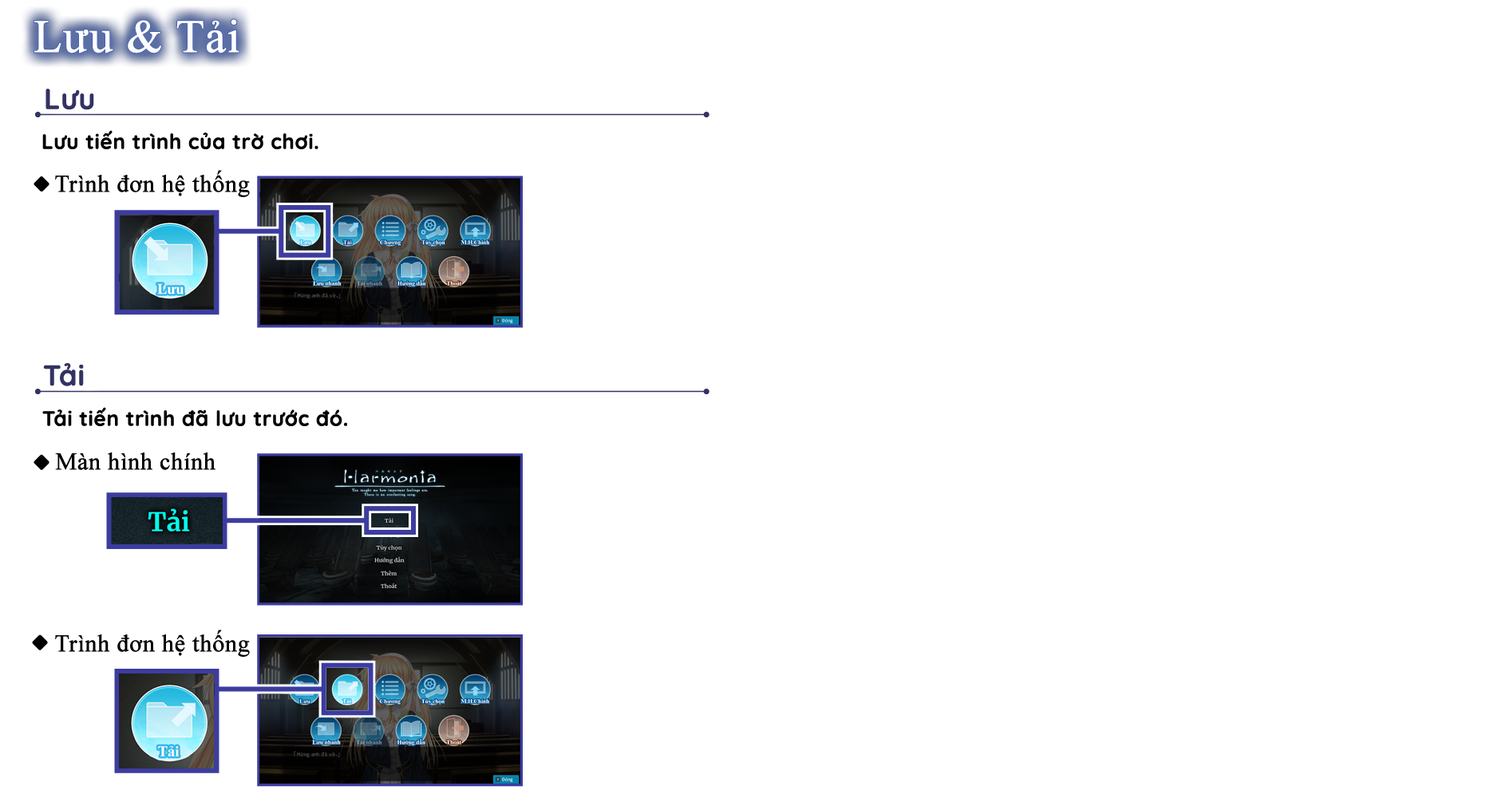
<style>
.page{position:relative;width:1494px;height:798px;background:#ffffff}
.page>*{position:absolute;margin:0}
.t1{font:46.3px "TimesNewRomanPSMT";color:#fefefe;font-weight:bold}
.t2{font:28.7px "Quicksand-Bold";color:#323264;font-weight:bold}
.t3{font:20.8px "Quicksand-Bold";color:#000000;font-weight:bold}
.t4{font:23.9px "TimesNewRomanPSMT";color:#000000;font-weight:bold}
</style>
<div class="page">
<p class="t1" style="left:34px;top:19px;width:205px;height:34px">Lưu &amp; Tải</p>
<p class="t1" style="left:34px;top:19px;width:205px;height:34px">Lưu &amp; Tải</p>
<p class="t2" style="left:45px;top:89px;width:49px;height:21px">Lưu</p>
<p class="t3" style="left:42px;top:130px;width:276px;height:19px">Lưu tiến trình của trờ chơi.</p>
<p class="t4" style="left:55px;top:170px;width:195px;height:27px">Trình đơn hệ thống</p>
<p class="t2" style="left:43px;top:363px;width:41px;height:23px">Tải</p>
<p class="t3" style="left:42px;top:407px;width:305px;height:19px">Tải tiến trình đã lưu trước đó.</p>
<p class="t4" style="left:55px;top:453px;width:160px;height:17px">Màn hình chính</p>
<p class="t4" style="left:55px;top:630px;width:195px;height:27px">Trình đơn hệ thống</p>
</div>
